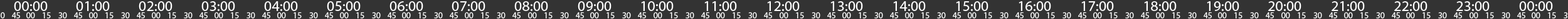
<style>
.page{position:relative;width:1568px;height:19px;background:#333333}
.page>*{position:absolute;margin:0}
.t1{font:15.1px "MyriadPro-Regular";color:#ffffff}
.t2{font:8.8px "MyriadPro-Regular";color:#ffffff}
</style>
<div class="page">
<p class="t1" style="left:14px;top:1px;width:34px;height:10px">00:00</p>
<p class="t1" style="left:76px;top:1px;width:34px;height:10px">01:00</p>
<p class="t1" style="left:139px;top:1px;width:33px;height:10px">02:00</p>
<p class="t1" style="left:201px;top:1px;width:34px;height:10px">03:00</p>
<p class="t1" style="left:264px;top:1px;width:34px;height:10px">04:00</p>
<p class="t1" style="left:327px;top:1px;width:34px;height:10px">05:00</p>
<p class="t1" style="left:389px;top:1px;width:34px;height:10px">06:00</p>
<p class="t1" style="left:452px;top:1px;width:33px;height:10px">07:00</p>
<p class="t1" style="left:514px;top:1px;width:34px;height:10px">08:00</p>
<p class="t1" style="left:578px;top:1px;width:34px;height:10px">09:00</p>
<p class="t1" style="left:641px;top:1px;width:33px;height:10px">10:00</p>
<p class="t1" style="left:704px;top:1px;width:33px;height:10px">11:00</p>
<p class="t1" style="left:767px;top:1px;width:33px;height:10px">12:00</p>
<p class="t1" style="left:830px;top:1px;width:33px;height:10px">13:00</p>
<p class="t1" style="left:893px;top:1px;width:33px;height:10px">14:00</p>
<p class="t1" style="left:956px;top:1px;width:32px;height:10px">15:00</p>
<p class="t1" style="left:1019px;top:1px;width:32px;height:10px">16:00</p>
<p class="t1" style="left:1081px;top:1px;width:33px;height:10px">17:00</p>
<p class="t1" style="left:1144px;top:1px;width:33px;height:10px">18:00</p>
<p class="t1" style="left:1207px;top:1px;width:32px;height:10px">19:00</p>
<p class="t1" style="left:1268px;top:1px;width:33px;height:10px">20:00</p>
<p class="t1" style="left:1332px;top:1px;width:33px;height:10px">21:00</p>
<p class="t1" style="left:1394px;top:1px;width:34px;height:10px">22:00</p>
<p class="t1" style="left:1456px;top:1px;width:34px;height:10px">23:00</p>
<p class="t1" style="left:1519px;top:1px;width:34px;height:10px">00:00</p>
<p class="t2" style="left:26px;top:13px;width:56px;height:6px"><span class="t1">    </span>00    15    30    45</p>
<p class="t2" style="left:89px;top:13px;width:56px;height:6px"><span class="t1">    </span>00    15    30    45</p>
<p class="t2" style="left:152px;top:13px;width:56px;height:6px"><span class="t1">    </span>00    15    30    45</p>
<p class="t2" style="left:215px;top:13px;width:55px;height:6px"><span class="t1">    </span>00    15    30    45</p>
<p class="t2" style="left:277px;top:13px;width:56px;height:6px"><span class="t1">    </span>00    15    30    45</p>
<p class="t2" style="left:340px;top:13px;width:56px;height:6px"><span class="t1">    </span>00    15    30    45</p>
<p class="t2" style="left:402px;top:13px;width:56px;height:6px"><span class="t1">    </span>00    15    30    45</p>
<p class="t2" style="left:465px;top:13px;width:56px;height:6px"><span class="t1">    </span>00    15    30    45</p>
<p class="t2" style="left:528px;top:13px;width:56px;height:6px"><span class="t1">    </span>00    15    30    45</p>
<p class="t2" style="left:590px;top:13px;width:56px;height:6px"><span class="t1">    </span>00    15    30    45</p>
<p class="t2" style="left:654px;top:13px;width:55px;height:6px"><span class="t1">    </span>00    15    30    45</p>
<p class="t2" style="left:716px;top:13px;width:56px;height:6px"><span class="t1">    </span>00    15    30    45</p>
<p class="t2" style="left:780px;top:13px;width:55px;height:6px"><span class="t1">    </span>00    15    30    45</p>
<p class="t2" style="left:842px;top:13px;width:56px;height:6px"><span class="t1">    </span>00    15    30    45</p>
<p class="t2" style="left:905px;top:13px;width:56px;height:6px"><span class="t1">    </span>00    15    30    45</p>
<p class="t2" style="left:968px;top:13px;width:56px;height:6px"><span class="t1">    </span>00    15    30    45</p>
<p class="t2" style="left:1030px;top:13px;width:56px;height:6px"><span class="t1">    </span>00    15    30    45</p>
<p class="t2" style="left:1093px;top:13px;width:56px;height:6px"><span class="t1">    </span>00    15    30    45</p>
<p class="t2" style="left:1156px;top:13px;width:56px;height:6px"><span class="t1">    </span>00    15    30    45</p>
<p class="t2" style="left:1218px;top:13px;width:56px;height:6px"><span class="t1">    </span>00    15    30    45</p>
<p class="t2" style="left:1281px;top:13px;width:56px;height:6px"><span class="t1">    </span>00    15    30    45</p>
<p class="t2" style="left:1344px;top:13px;width:56px;height:6px"><span class="t1">    </span>00    15    30    45</p>
<p class="t2" style="left:1406px;top:13px;width:56px;height:6px"><span class="t1">    </span>00    15    30    45</p>
<p class="t2" style="left:1470px;top:13px;width:55px;height:6px"><span class="t1">    </span>00    15    30    45</p>
</div>
